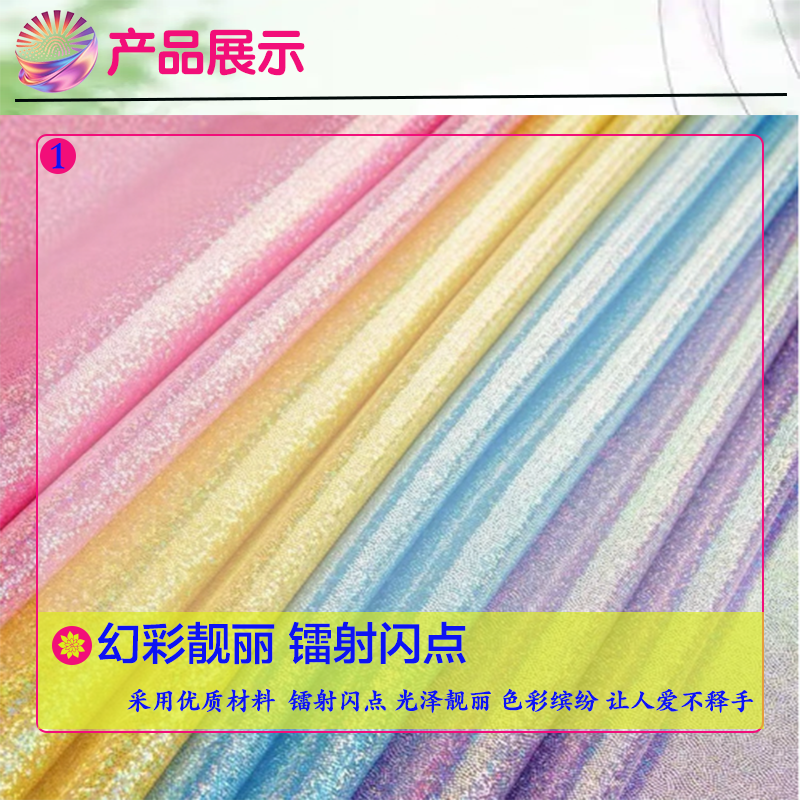
<style>
.page{position:relative;width:800px;height:800px}
.page>*{position:absolute;margin:0}
.t1{font:50px "STYuanti-SC-Bold";color:#f20e79}
.t2{font:40px "STKaitiSC-Black";color:#0d13f3}
.t3{font:45px "FZLTZHK--GBK1-0";color:#0d13f3}
.t4{font:47px "FZLTZHK--GBK1-0";color:#0d13f3}
.t5{font:25px "STKaitiSC-Black";color:#0d13f3}
</style>
<div class="page">
<p class="t1" style="left:107px;top:27px;width:198px;height:49px">产品展示</p>
<p class="t2" style="left:51px;top:143px;width:14px;height:26px">1</p>
<p class="t3" style="left:97px;top:621px;width:369px;height:44px"><span class="t4">  </span>幻彩靓丽 镭射闪点</p>
<p class="t5" style="left:127px;top:688px;width:627px;height:25px">采用优质材料  镭射闪点 光泽靓丽 色彩缤纷 让人爱不释手</p>
</div>
